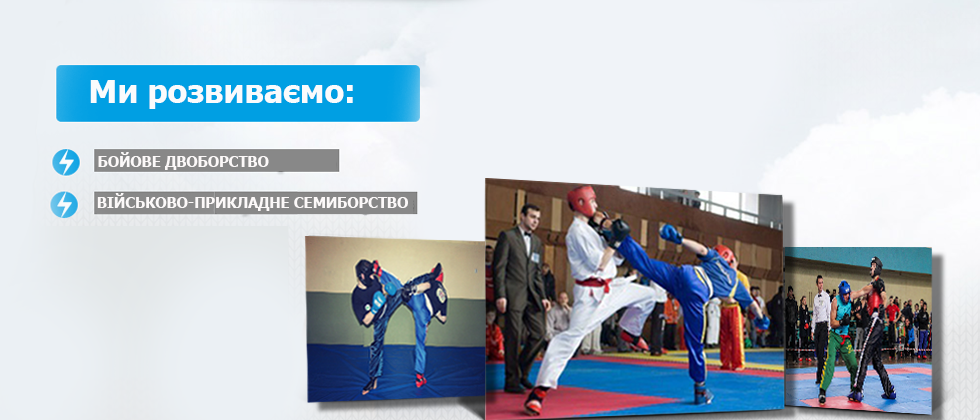
<style>
.page{position:relative;width:980px;height:420px}
.page>*{position:absolute;margin:0}
.t1{font:32px "Tahoma-Bold";color:#fafbfc}
.t2{font:14.7px "Tahoma-Bold";color:#fcf9f9}
</style>
<div class="page">
<p class="t1" style="left:90px;top:80px;width:263px;height:29px">Ми розвиваємо:</p>
<p class="t2" style="left:98px;top:152px;width:171px;height:18px">БОЙОВЕ ДВОБОРСТВО</p>
<p class="t2" style="left:97px;top:193px;width:311px;height:18px">ВІЙСЬКОВО-ПРИКЛАДНЕ СЕМИБОРСТВО</p>
</div>
